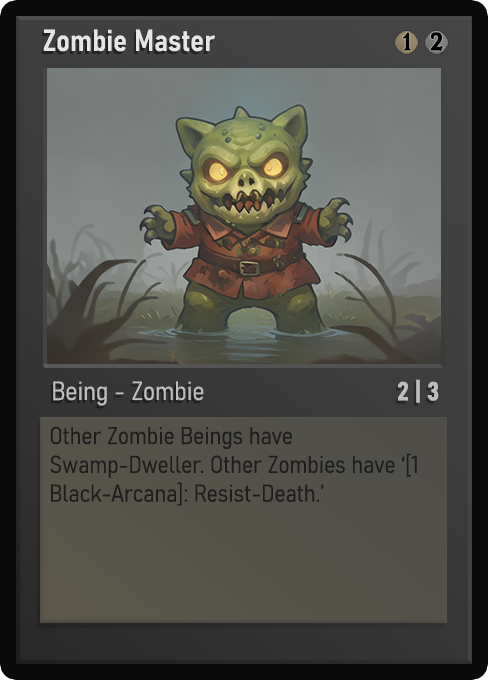
<style>
.page{position:relative;width:488px;height:680px}
.page>*{position:absolute;margin:0}
.t1{font:30px "Bahnschrift-SemiBoldSemiCondensed";color:#f2f2f2;font-weight:bold}
.t2{font:25px "WTRRoycroft";color:#000000;font-weight:bold;scale:1.09 1}
.t3{font:26px "Bahnschrift-LightSemiCondensed";color:#c8c8c8;font-weight:bold}
.t4{font:26px "Bahnschrift-BoldSemiCondensed";color:#bdbdbd;font-weight:bold}
.t5{font:24px "Bahnschrift-LightSemiCondensed";color:#1e1e1e;font-weight:bold}
</style>
<div class="page">
<p class="t1" style="left:43px;top:29px;width:172px;height:23px;opacity:0.9">Zombie Master</p>
<p class="t2" style="left:403px;top:32px;width:8px;height:19px">1</p>
<p class="t2" style="left:430px;top:32px;width:13px;height:19px">2</p>
<p class="t3" style="left:53px;top:381px;width:151px;height:25px;opacity:0.9">Being - Zombie</p>
<p class="t4" style="left:398px;top:379px;width:41px;height:24px">2 | 3</p>
<p class="t5" style="left:50px;top:426px;width:367px;height:80px">Other Zombie Beings have Swamp-Dweller. Other Zombies have ‘[1 Black-Arcana]: Resist-Death.’</p>
</div>
